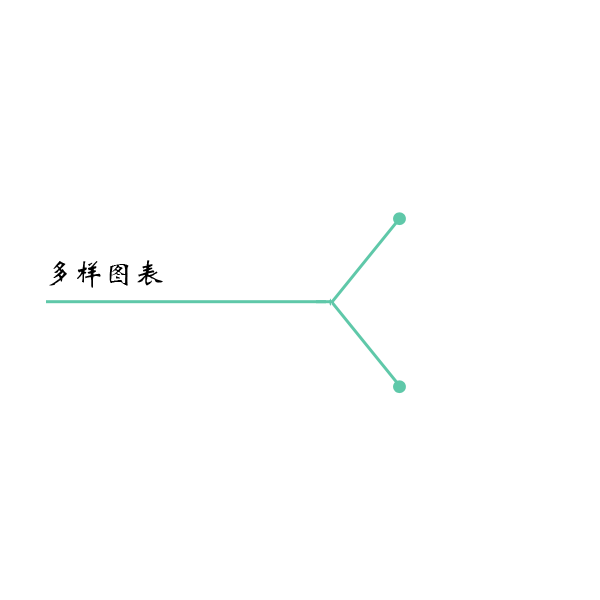
<style>
.page{position:relative;width:600px;height:600px;background:#ffffff}
.page>*{position:absolute;margin:0}
.t1{font:30px "STXinwei";color:#000000}
</style>
<div class="page">
<p class="t1" style="left:49px;top:260px;width:114px;height:28px">多样图表</p>
</div>
